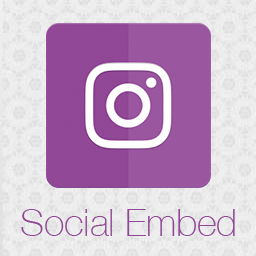
<style>
.page{position:relative;width:256px;height:256px}
.page>*{position:absolute;margin:0}
.t1{font:37.5px "HelveticaNeue-Thin";color:#904795}
</style>
<div class="page">
<p class="t1" style="left:21px;top:209px;width:214px;height:27px">Social Embed</p>
</div>
